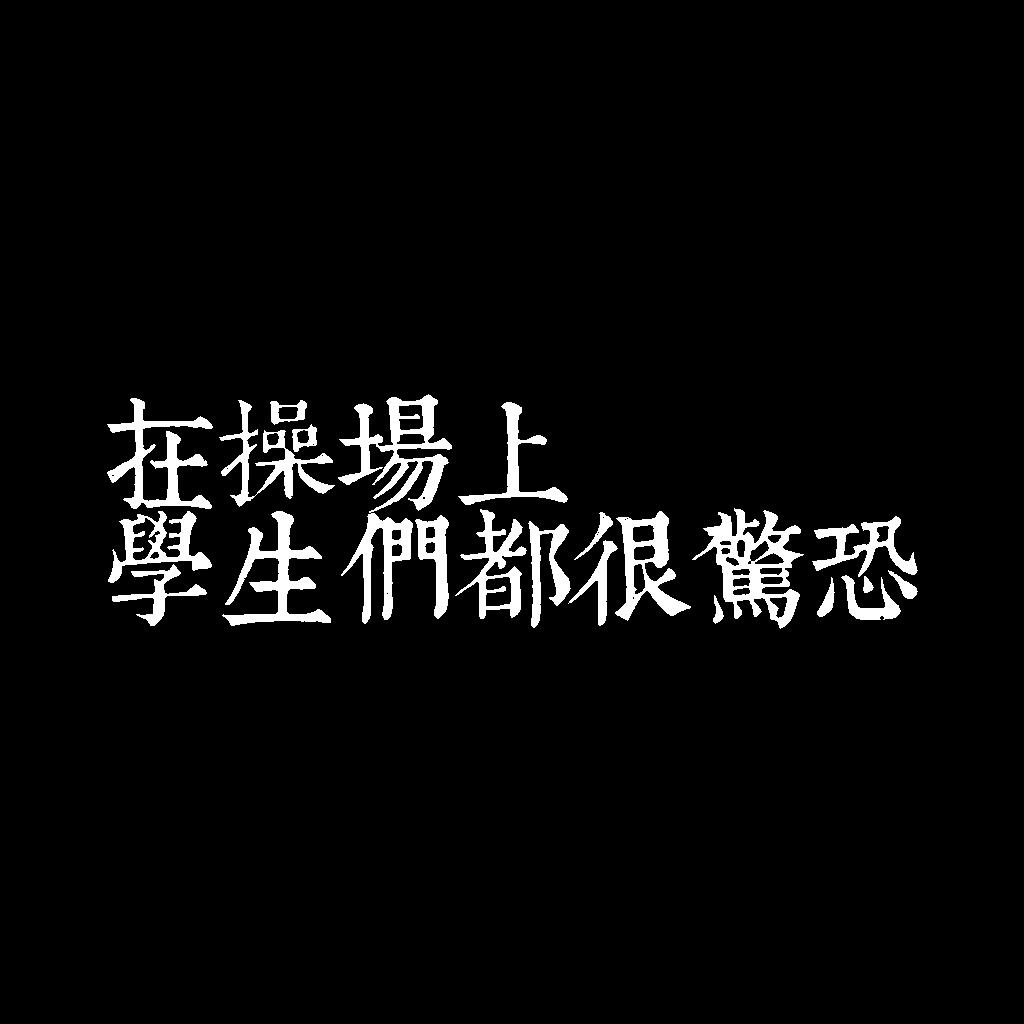
<style>
.page{position:relative;width:1024px;height:1024px;background:#000000}
.page>*{position:absolute;margin:0}
.t1{font:120px/115px "TpldKhangXiDictTrial";letter-spacing:-0.02em;color:#ffffff}
</style>
<div class="page">
<p class="t1" style="left:107px;top:394px;width:811px;height:235px">在操場上<br>學生們都很驚恐</p>
</div>
